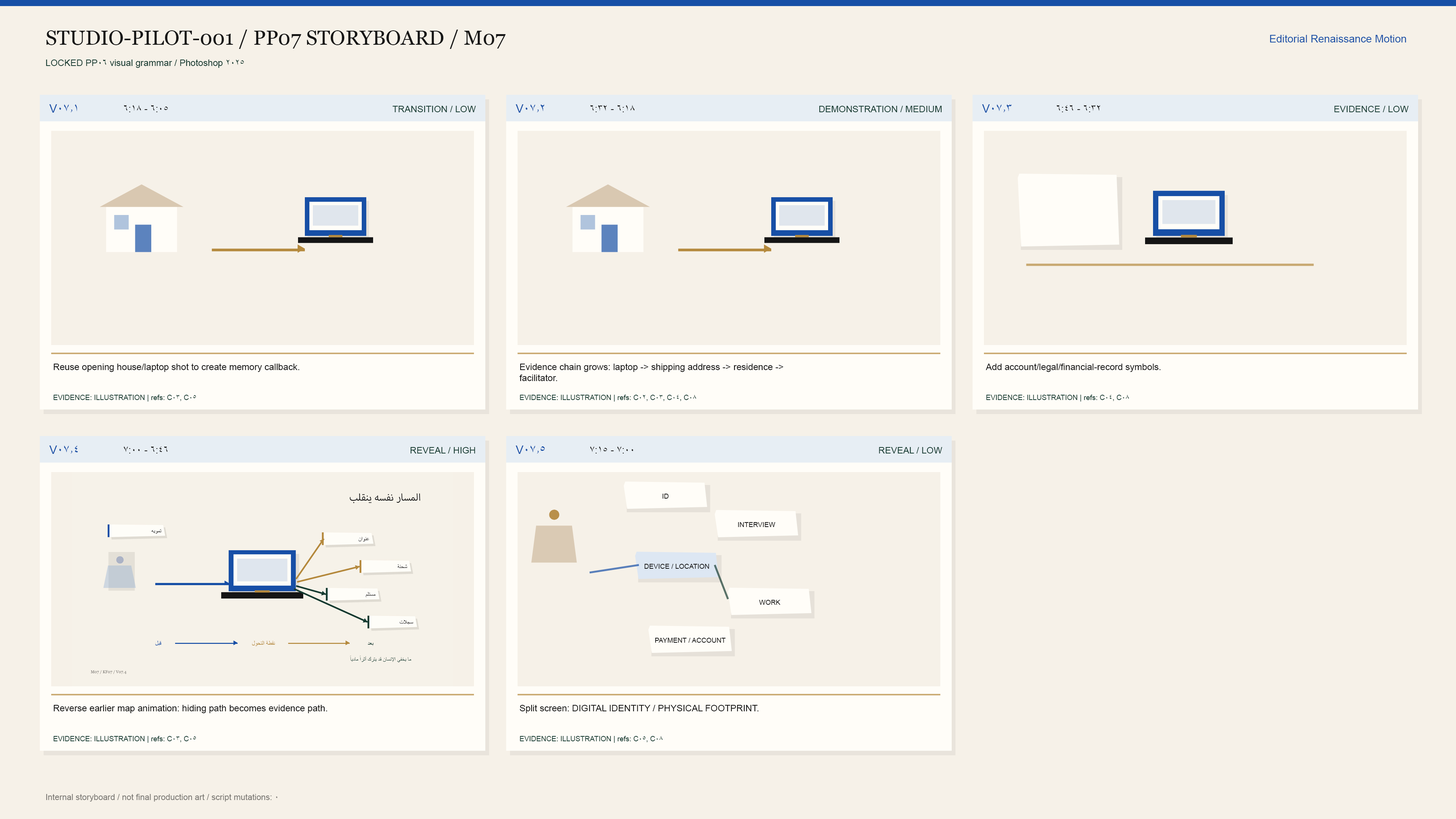
<style>
.page{position:relative;width:1456px;height:819px;background:#f6f1e8}
.page>*{position:absolute;margin:0}
.t1{font:20.5px "Georgia";color:#151515}
.t2{font:10.6px "ArialMT";color:#174fa6}
.t3{font:9.1px "ArialMT";color:#173c32}
.t4{font:11.8px "ArialMT";color:#174fa6}
.t5{font:9.9px "ArialMT";color:#151515}
.t6{font:9.1px "ArialMT";color:#151515}
.t7{font:7.2px "ArialMT";color:#173c32}
.t8{font:6.8px "ArialMT";color:#151515}
.t9{font:23.3px "ArialMT";color:#b58a3e}
.t10{font:8.3px "ArialMT";color:#7b7974}
</style>
<div class="page">
<p class="t1" style="left:46px;top:30px;width:460px;height:19px">STUDIO-PILOT-001 / PP07 STORYBOARD / M07</p>
<p class="t2" style="left:1270px;top:35px;width:136px;height:7px">Editorial Renaissance Motion</p>
<p class="t3" style="left:46px;top:59px;width:198px;height:9px">LOCKED PP06 visual grammar / Photoshop 2025</p>
<p class="t4" style="left:49px;top:104px;width:28px;height:9px">V07.1</p>
<p class="t5" style="left:124px;top:105px;width:44px;height:7px">6:05 - 6:18</p>
<p class="t3" style="left:392px;top:106px;width:84px;height:6px">TRANSITION / LOW</p>
<p class="t4" style="left:516px;top:104px;width:28px;height:9px">V07.2</p>
<p class="t5" style="left:590px;top:105px;width:45px;height:7px">6:18 - 6:32</p>
<p class="t3" style="left:819px;top:106px;width:123px;height:6px">DEMONSTRATION / MEDIUM</p>
<p class="t4" style="left:982px;top:104px;width:30px;height:9px">V07.3</p>
<p class="t5" style="left:1057px;top:105px;width:43px;height:7px">6:32 - 6:46</p>
<p class="t3" style="left:1334px;top:106px;width:75px;height:6px">EVIDENCE / LOW</p>
<p class="t6" style="left:53px;top:363px;width:247px;height:9px">Reuse opening house/laptop shot to create memory callback.</p>
<p class="t6" style="left:519px;top:363px;width:264px;height:18px">Evidence chain grows: laptop -&gt; shipping address -&gt; residence -&gt;<br>facilitator.</p>
<p class="t6" style="left:986px;top:363px;width:175px;height:9px">Add account/legal/financial-record symbols.</p>
<p class="t7" style="left:53px;top:395px;width:143px;height:7px">EVIDENCE: ILLUSTRATION | refs: C03, C05</p>
<p class="t7" style="left:520px;top:395px;width:176px;height:7px">EVIDENCE: ILLUSTRATION | refs: C02, C03, C04, C08</p>
<p class="t7" style="left:986px;top:395px;width:143px;height:7px">EVIDENCE: ILLUSTRATION | refs: C04, C08</p>
<p class="t4" style="left:49px;top:446px;width:29px;height:8px">V07.4</p>
<p class="t5" style="left:124px;top:446px;width:44px;height:7px">6:46 - 7:00</p>
<p class="t3" style="left:410px;top:447px;width:65px;height:6px">REVEAL / HIGH</p>
<p class="t4" style="left:516px;top:446px;width:29px;height:8px">V07.5</p>
<p class="t5" style="left:590px;top:446px;width:43px;height:7px">7:00 - 7:15</p>
<p class="t3" style="left:879px;top:447px;width:63px;height:6px">REVEAL / LOW</p>
<p class="t8" style="left:662px;top:494px;width:7px;height:5px">ID</p>
<p class="t9" style="left:549px;top:510px;width:10px;height:10px;opacity:0.95">●</p>
<p class="t8" style="left:738px;top:522px;width:37px;height:5px">INTERVIEW</p>
<p class="t8" style="left:645px;top:564px;width:64px;height:5px">DEVICE / LOCATION</p>
<p class="t8" style="left:759px;top:600px;width:21px;height:5px">WORK</p>
<p class="t8" style="left:655px;top:638px;width:71px;height:5px">PAYMENT / ACCOUNT</p>
<p class="t6" style="left:53px;top:704px;width:274px;height:9px">Reverse earlier map animation: hiding path becomes evidence path.</p>
<p class="t6" style="left:520px;top:704px;width:239px;height:9px">Split screen: DIGITAL IDENTITY / PHYSICAL FOOTPRINT.</p>
<p class="t7" style="left:53px;top:736px;width:143px;height:7px">EVIDENCE: ILLUSTRATION | refs: C03, C05</p>
<p class="t7" style="left:520px;top:736px;width:143px;height:7px">EVIDENCE: ILLUSTRATION | refs: C05, C08</p>
<p class="t10" style="left:46px;top:794px;width:232px;height:8px">Internal storyboard / not final production art / script mutations: 0</p>
</div>
